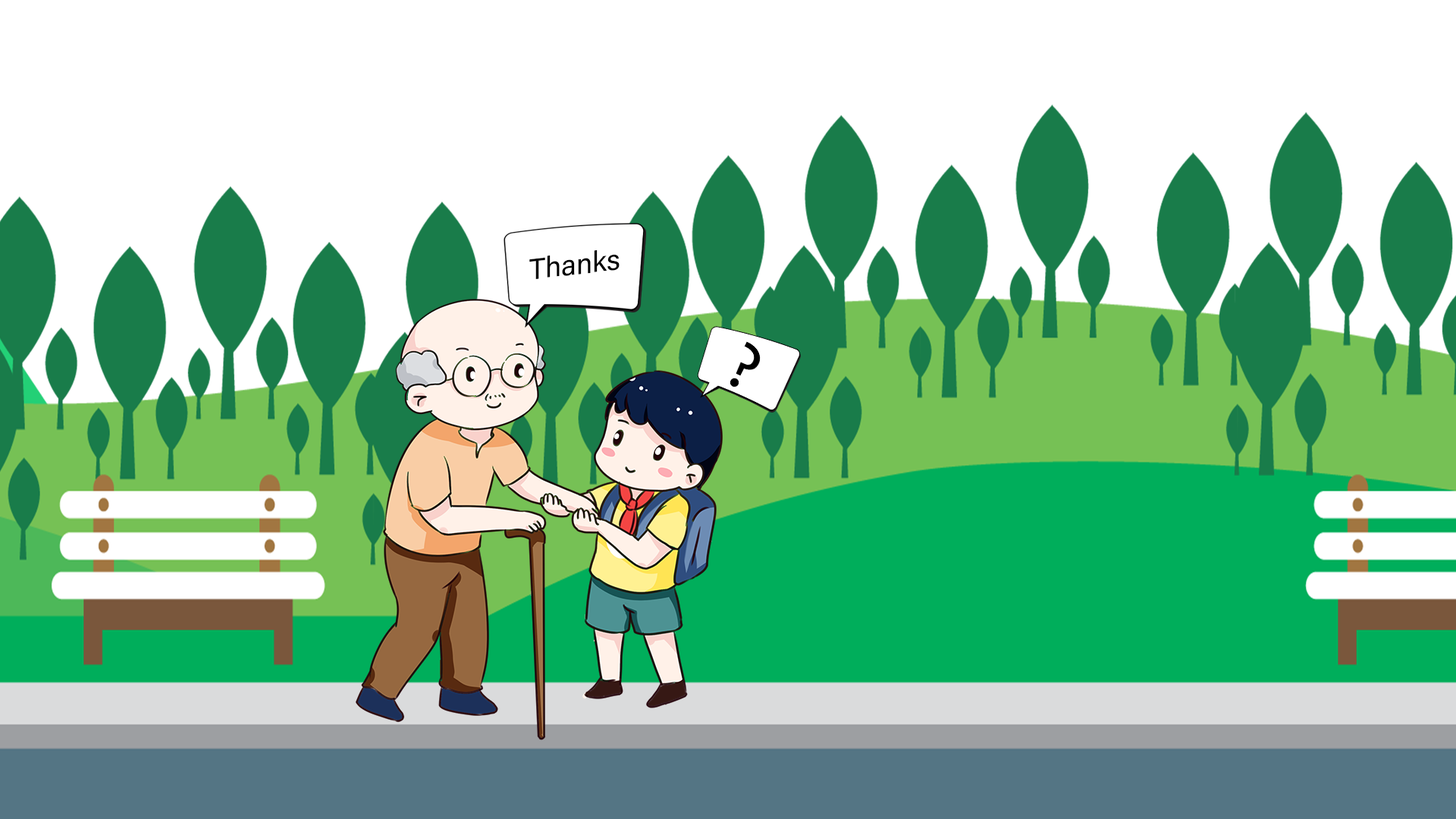
<style>
.page{position:relative;width:1456px;height:819px;background:#ffffff}
.page>*{position:absolute;margin:0}
.t1{font:29.3px "AcuminConcept-Regular";color:#000000}
</style>
<div class="page">
<p class="t1" style="left:529px;top:249px;width:91px;height:30px;rotate:-7deg">Thanks</p>
</div>
